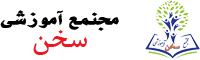
<style>
.page{position:relative;width:200px;height:60px;background:#ffffff}
.page>*{position:absolute;margin:0}
.t1{font:18px "BNikiBorder";color:#000000;scale:1.49 1}
.t2{font:30px "BNazaninBold";color:#ee1721}
</style>
<div class="page">
<p class="t1" style="left:0px;top:10px;width:119px;height:21px">مجنمع آموزشي</p>
<p class="t2" style="left:33px;top:30px;width:54px;height:25px">سخن</p>
</div>
